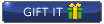
<style>
.page{position:relative;width:104px;height:24px;background:#20305f}
.page>*{position:absolute;margin:0}
.t1{font:12px "GillSans";letter-spacing:0.025em;color:#ffffff}
</style>
<div class="page">
<p class="t1" style="left:23px;top:7px;width:40px;height:10px">GIFT IT</p>
</div>
